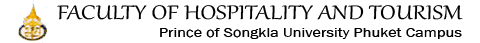
<style>
.page{position:relative;width:480px;height:43px;background:#ffffff}
.page>*{position:absolute;margin:0}
.t1{font:24px "Gabriola";color:#000000;scale:1.23 1}
.t2{font:14px "FranklinGothic-Book";color:#000000;scale:1.17 1}
</style>
<div class="page">
<p class="t1" style="left:57px;top:5px;width:406px;height:15px">FACULTY OF HOSPITALITY AND TOURISM</p>
<p class="t2" style="left:160px;top:28px;width:302px;height:11px">Prince of Songkla University Phuket Campus</p>
</div>
